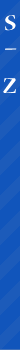
<style>
.page{position:relative;width:20px;height:350px;background:#1155bb}
.page>*{position:absolute;margin:0}
.t1{font:24px "NuevaStd-Bold";color:#ffffff}
.t2{font:30px "NuevaStd-Bold"}
</style>
<div class="page">
<p class="t1" style="left:5px;top:15px;width:11px;height:16px">S</p>
<p class="t2" style="left:5px;top:48px;width:12px;height:2px">–</p>
<p class="t1" style="left:3px;top:78px;width:13px;height:15px">Z</p>
</div>
